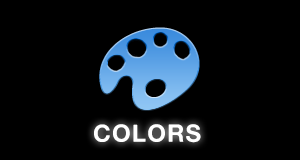
<style>
.page{position:relative;width:300px;height:160px;background:#000000}
.page>*{position:absolute;margin:0}
.t1{font:24px "AlteHaasGrotesk_Bold";letter-spacing:0.05em;color:#ffffff}
</style>
<div class="page">
<p class="t1" style="left:94px;top:124px;width:107px;height:19px">COLORS</p>
</div>
